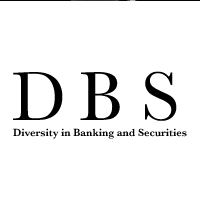
<style>
.page{position:relative;width:200px;height:200px;background:#ffffff}
.page>*{position:absolute;margin:0}
.t1{font:10.7px "Baskerville-SemiBold"}
</style>
<div class="page">
<p class="t1" style="left:13px;top:127px;width:174px;height:11px">Diversity in Banking and Securities</p>
</div>
